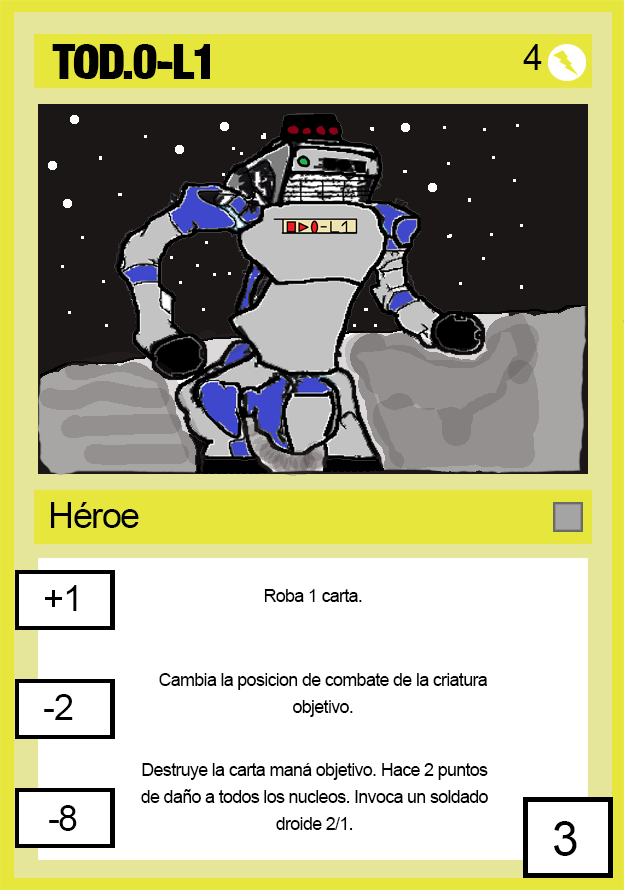
<style>
.page{position:relative;width:624px;height:890px;background:#ffffff}
.page>*{position:absolute;margin:0}
.t1{font:48px "Harvest";letter-spacing:-0.04em;color:#000000}
.t2{font:36px "ArialMT";letter-spacing:-0.04em;color:#000000}
.t3{font:18px "ArialMT";letter-spacing:-0.04em;color:#000000}
.t4{font:18px/27px "ArialMT";letter-spacing:-0.04em;color:#000000}
.t5{font:48px "ArialMT";letter-spacing:-0.04em;color:#000000}
</style>
<div class="page">
<p class="t1" style="left:52px;top:44px;width:158px;height:35px">TOD.0-L1</p>
<p class="t2" style="left:523px;top:44px;width:19px;height:26px">4</p>
<p class="t2" style="left:51px;top:502px;width:88px;height:26px">Héroe</p>
<p class="t2" style="left:45px;top:585px;width:32px;height:26px">+1</p>
<p class="t3" style="left:264px;top:589px;width:98px;height:13px">Roba 1 carta.</p>
<p class="t4" style="left:159px;top:673px;width:328px;height:44px;text-align:center">Cambia la posicion de combate de la criatura objetivo.</p>
<p class="t2" style="left:44px;top:694px;width:29px;height:26px">-2</p>
<p class="t4" style="left:141px;top:763px;width:347px;height:67px;text-align:center">Destruye la carta maná objetivo. Hace 2 puntos de daño a todos los nucleos. Invoca un soldado droide 2/1.</p>
<p class="t2" style="left:49px;top:805px;width:28px;height:26px">-8</p>
<p class="t5" style="left:554px;top:821px;width:23px;height:35px">3</p>
</div>
